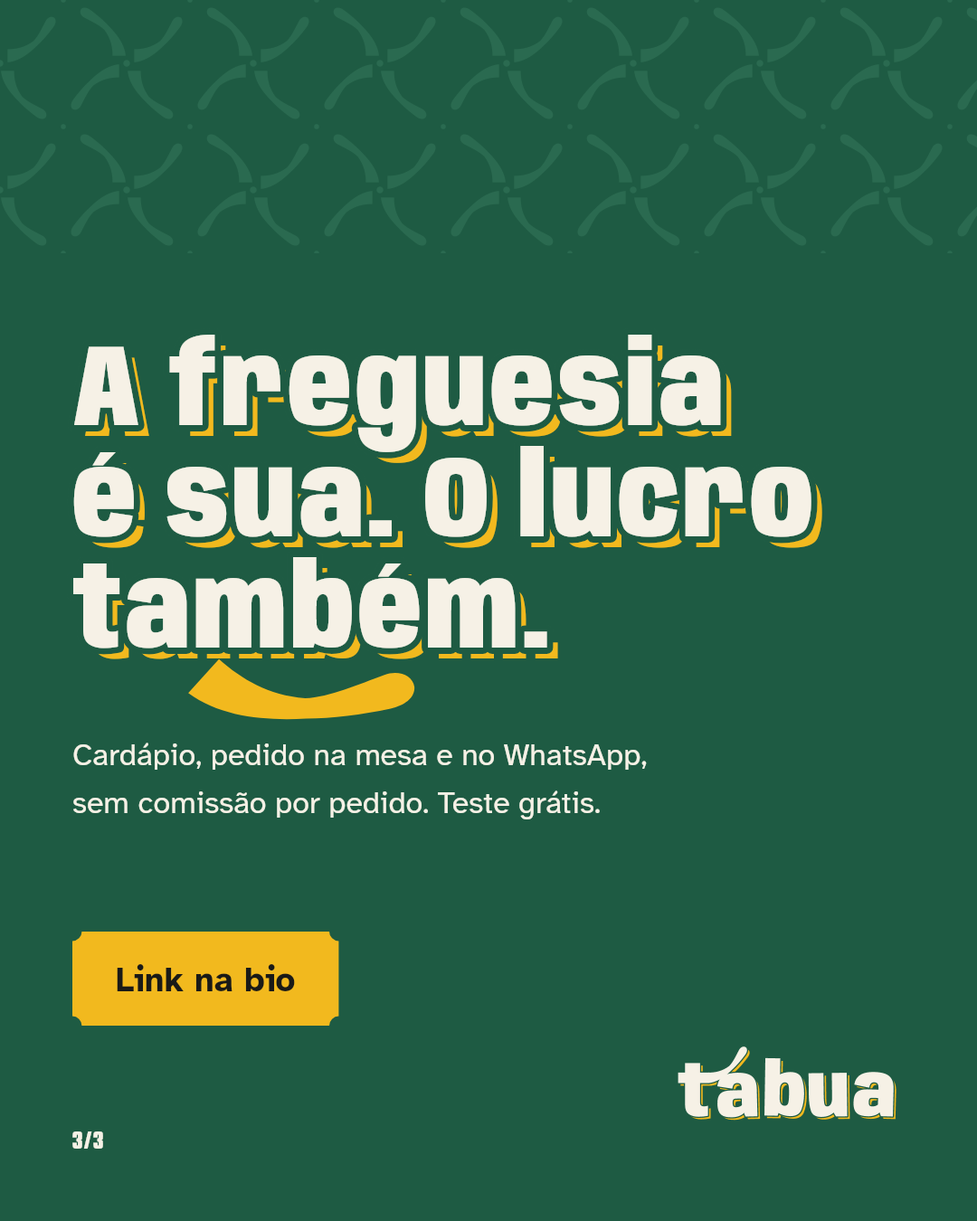
<style>
.page{position:relative;width:977px;height:1221px;background:#1e5b43}
.page>*{position:absolute;margin:0}
.t1{font:115.8px/111.2px "Anybody-Black-W75";letter-spacing:0.034em;color:#f6f1e6}
.t2{font:115.8px/111.2px "Anybody-Black-W75";letter-spacing:0.034em}
.t3{font:30.7px/47.9px "AtkinsonHyperlegible-Regular";color:#f6f1e6}
.t4{font:34.4px "AtkinsonHyperlegible-Bold";color:#1a1a17}
.t5{font:25.3px "Anybody-ExtraBold-W60";letter-spacing:0.06em;color:#f6f1e6}
</style>
<div class="page">
<p class="t1" style="left:67px;top:328px;width:751px;height:327px">A freguesia<br>é sua. O lucro<br>também.</p>
<p class="t2" style="left:84px;top:345px;width:738px;height:314px">A freguesia<br>é sua. O lucro<br>também.</p>
<p class="t3" style="left:73px;top:742px;width:574px;height:77px">Cardápio, pedido na mesa e no WhatsApp,<br>sem comissão por pedido. Teste grátis.</p>
<p class="t4" style="left:117px;top:964px;width:178px;height:27px">Link na bio</p>
<p class="t5" style="left:72px;top:1131px;width:31px;height:18px">3/3</p>
</div>
